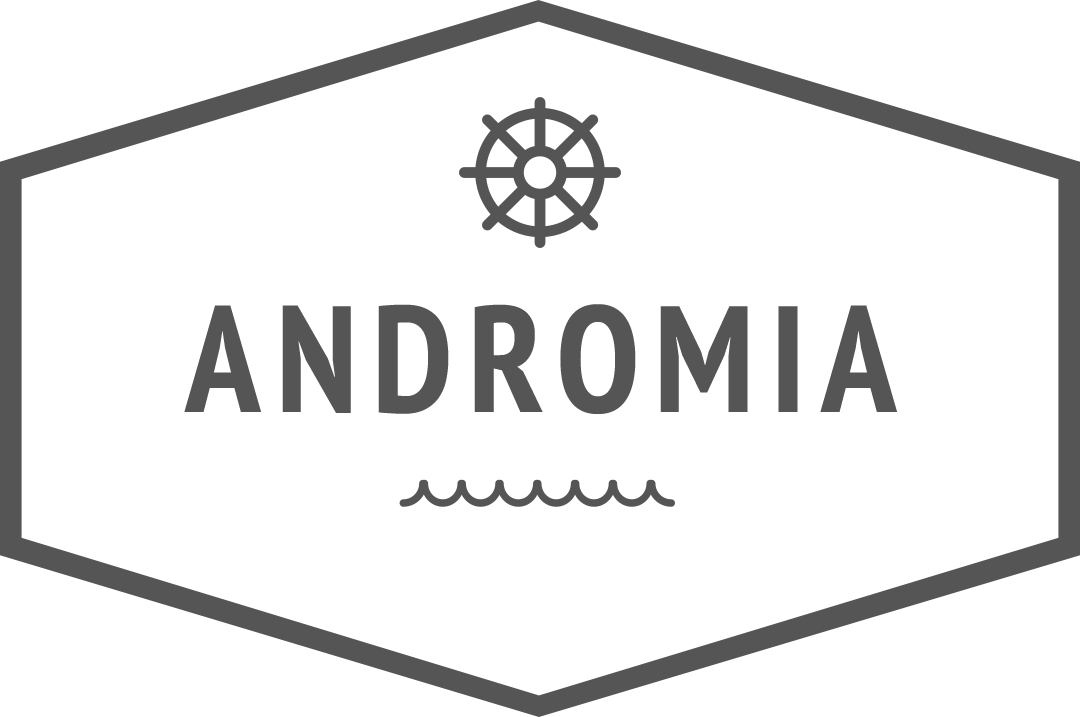
<style>
.page{position:relative;width:1080px;height:717px;background:#ffffff}
.page>*{position:absolute;margin:0}
.t1{font:150.9px "PTSans-NarrowBold";letter-spacing:0.1em;color:#555555;text-transform:uppercase}
</style>
<div class="page">
<p class="t1" style="left:184px;top:304px;width:713px;height:110px">Andromia</p>
</div>
